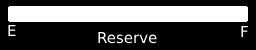
<style>
.page{position:relative;width:256px;height:50px;background:#000000}
.page>*{position:absolute;margin:0}
.t1{font:15px "DejaVuSans";color:#ffffff}
</style>
<div class="page">
<p class="t1" style="left:8px;top:25px;width:8px;height:11px">E</p>
<p class="t1" style="left:241px;top:26px;width:7px;height:11px">F</p>
<p class="t1" style="left:98px;top:32px;width:59px;height:12px">Reserve</p>
</div>
